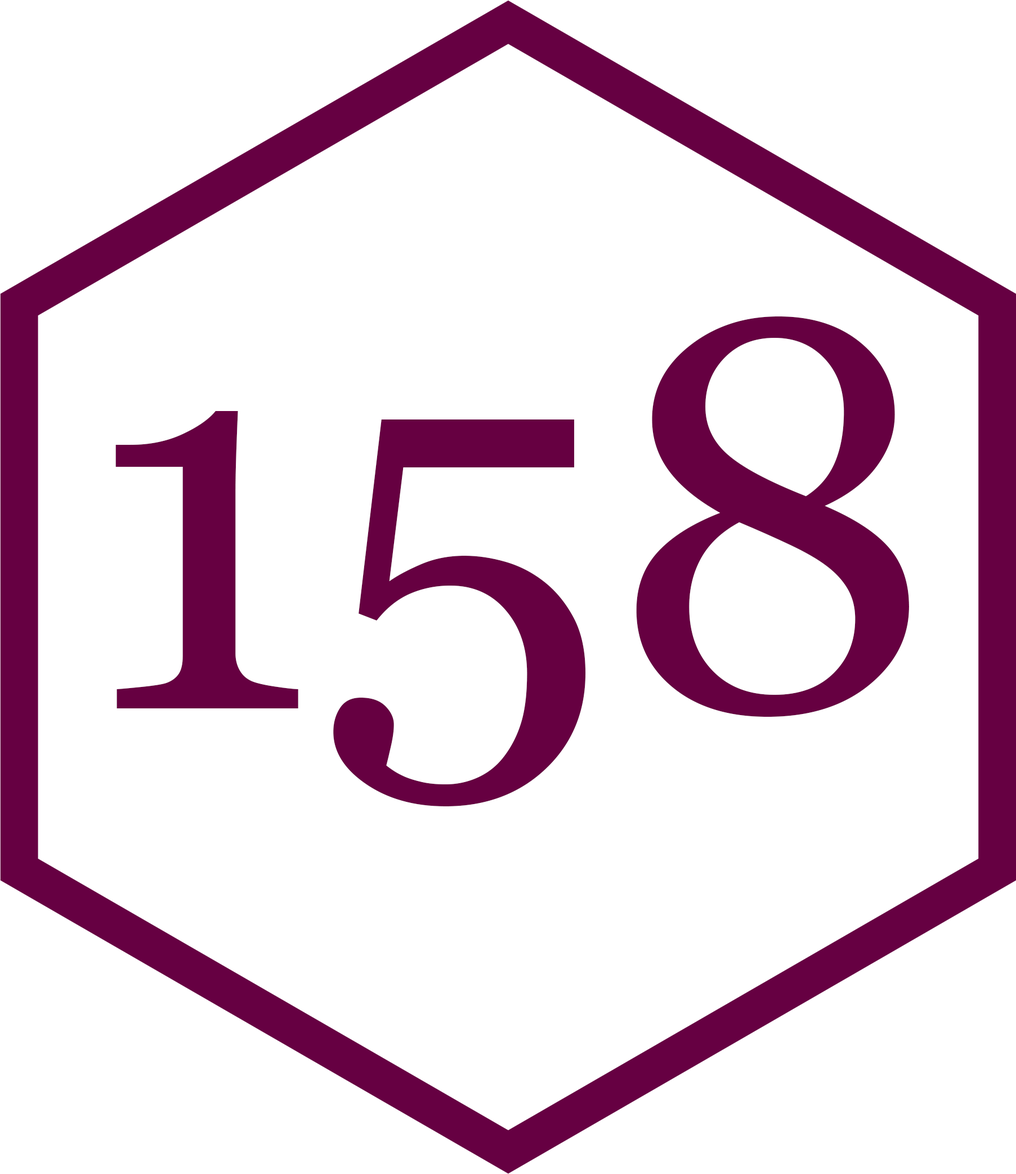
<style>
.page{position:relative;width:1016px;height:1174px;background:#ffffff}
.page>*{position:absolute;margin:0}
.t1{font:551.2px "Georgia";color:#660042}
</style>
<div class="page">
<p class="t1" style="left:115px;top:316px;width:794px;height:490px">158</p>
</div>
